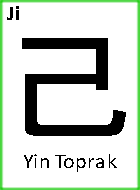
<style>
.page{position:relative;width:140px;height:190px;background:#ffffff}
.page>*{position:absolute;margin:0}
.t1{font:21.2px "Calibri-Bold";letter-spacing:-0.01em;color:#000000}
.t2{font:127px "MS-Gothic";color:#000000}
.t3{font:21.2px "Calibri";letter-spacing:-0.01em;color:#000000}
</style>
<div class="page">
<p class="t1" style="left:7px;top:6px;width:12px;height:14px">Ji</p>
<p class="t2" style="left:22px;top:38px;width:104px;height:98px">己</p>
<p class="t3" style="left:24px;top:154px;width:93px;height:18px">Yin Toprak</p>
</div>
